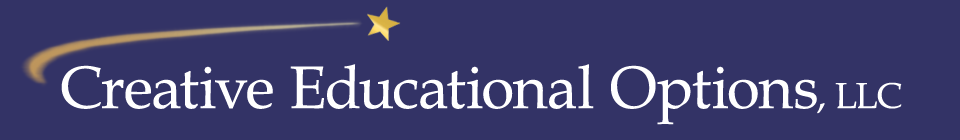
<style>
.page{position:relative;width:960px;height:140px;background:#333366}
.page>*{position:absolute;margin:0}
.t1{font:60px "BookAntiqua";color:#ffffff}
.t2{font:36px "BookAntiqua";color:#ffffff}
</style>
<div class="page">
<p class="t1" style="left:61px;top:64px;width:756px;height:61px">Creative Educational Options</p>
<p class="t2" style="left:817px;top:82px;width:85px;height:32px">, LLC</p>
</div>
